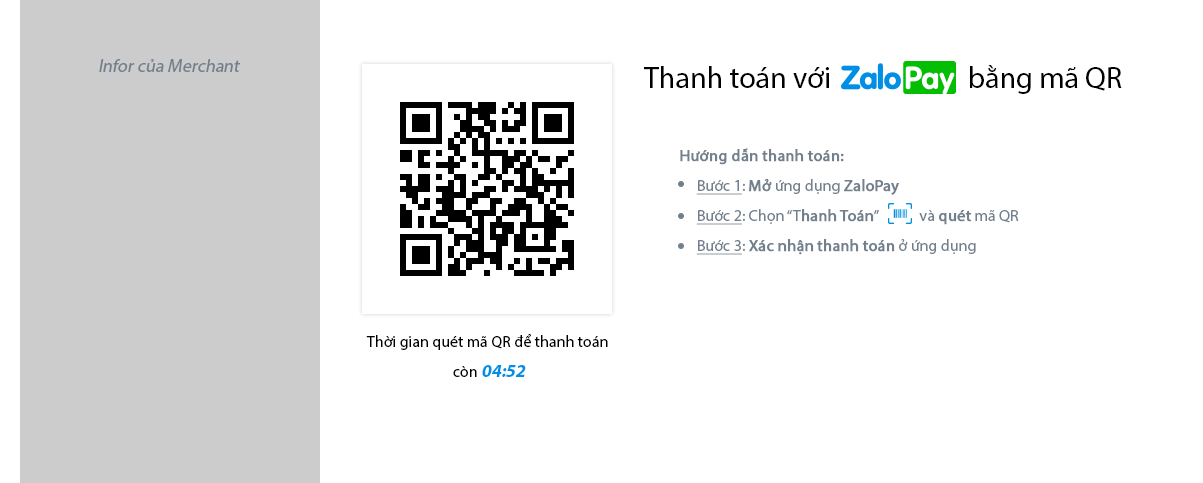
<style>
.page{position:relative;width:1203px;height:483px;background:#ffffff}
.page>*{position:absolute;margin:0}
.t1{font:18px "MyriadPro-Regular";color:#727f8c;font-style:italic}
.t2{font:30px "MyriadPro-Regular";color:#000000}
.t3{font:16px "MyriadPro-Regular";color:#727f8c;font-weight:bold}
.t4{font:16px/30px "MyriadPro-Regular";color:#727f8c;font-weight:bold}
.t5{font:16px/30px "MyriadPro-Regular";color:#727f8c;text-decoration:underline}
.t6{font:16px/30px "MyriadPro-Regular";color:#727f8c}
.t7{font:16px/30px "MyriadPro-Regular";color:#000000}
.t8{font:18px/30px "MyriadPro-Bold";color:#008fe5;font-style:italic}
</style>
<div class="page">
<p class="t1" style="left:99px;top:59px;width:142px;height:13px">Infor của Merchant</p>
<p class="t2" style="left:644px;top:65px;width:478px;height:29px">Thanh toán với      bằng mã QR</p>
<p class="t3" style="left:680px;top:148px;width:164px;height:17px">Hướng dẫn thanh toán:</p>
<p class="t4" style="left:696px;top:179px;width:323px;height:76px"><span class="t5">Bước 1</span><span class="t6">: </span>Mở<span class="t6"> ứng dụng </span>ZaloPay<br><span class="t5">Bước 2</span><span class="t6">: Chọn “T</span>hanh Toán<span class="t6">”   và </span>quét<span class="t6"> mã QR<br></span><span class="t5">Bước 3</span><span class="t6">: </span>Xác nhận thanh toán<span class="t6"> ở ứng dụng</span></p>
<p class="t7" style="left:366px;top:334px;width:242px;height:43px;text-align:center">Thời gian quét mã QR để thanh toán <br>còn <span class="t8">04:52</span></p>
</div>
